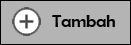
<style>
.page{position:relative;width:131px;height:45px;background:#b4b4b4}
.page>*{position:absolute;margin:0}
.t1{font:18px "BerlinSansFB-Reg";color:#040404}
</style>
<div class="page">
<p class="t1" style="left:52px;top:15px;width:63px;height:12px">Tambah</p>
</div>
